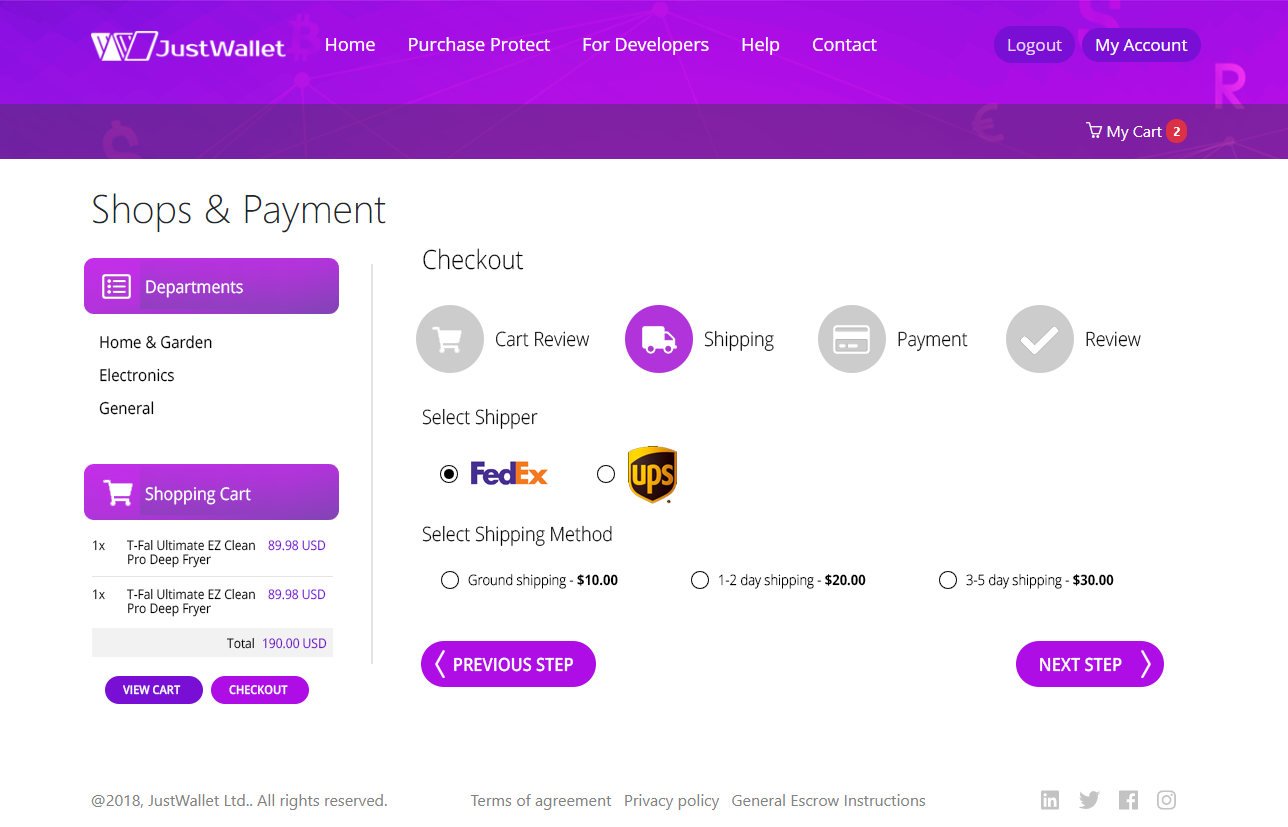
<style>
.page{position:relative;width:1288px;height:827px;background:#ffffff}
.page>*{position:absolute;margin:0}
.t1{font:26.4px "OpenSans-Light";color:#000000;scale:0.91 1}
.t2{font:17.6px "OpenSans";color:#ffffff;scale:0.91 1}
.t3{font:16.5px/33px "OpenSans";color:#000000;scale:0.91 1}
.t4{font:19.8px "OpenSans-Light";color:#000000;scale:0.91 1}
.t5{font:13.2px "OpenSans";scale:0.91 1}
.t6{font:13.2px "OpenSans";color:#000000;scale:0.91 1}
.t7{font:13.2px "OpenSans";color:#790fd4;scale:0.91 1}
.t8{font:14.3px "OpenSans-Light";color:#000000;scale:0.91 1}
.t9{font:14.3px "OpenSans-Bold";color:#000000;scale:0.91 1}
.t10{font:13.2px "OpenSans";color:#730ec9;scale:0.91 1}
.t11{font:18.2px "OpenSans-Semibold";color:#ffffff;text-transform:uppercase;scale:0.9 1}
.t12{font:12.1px "OpenSans-Semibold";color:#ffffff;text-transform:uppercase;scale:0.91 1}
</style>
<div class="page">
<p class="t1" style="left:423px;top:248px;width:101px;height:22px">Checkout</p>
<p class="t2" style="left:146px;top:280px;width:97px;height:18px">Departments</p>
<p class="t3" style="left:99px;top:335px;width:113px;height:80px">Home &amp; Garden<br>Electronics<br>General</p>
<p class="t4" style="left:496px;top:331px;width:94px;height:16px">Cart Review</p>
<p class="t4" style="left:704px;top:330px;width:70px;height:21px">Shipping</p>
<p class="t4" style="left:898px;top:331px;width:70px;height:20px">Payment</p>
<p class="t4" style="left:1086px;top:331px;width:55px;height:16px">Review</p>
<p class="t4" style="left:422px;top:408px;width:116px;height:21px">Select Shipper</p>
<p class="t2" style="left:145px;top:486px;width:106px;height:19px">Shopping Cart</p>
<p class="t4" style="left:422px;top:525px;width:190px;height:21px">Select Shipping Method</p>
<p class="t5" style="left:93px;top:540px;width:12px;height:11px">1x</p>
<p class="t6" style="left:127px;top:539px;width:128px;height:29px">T-Fal Ultimate EZ Clean <br>Pro Deep Fryer</p>
<p class="t7" style="left:268px;top:540px;width:58px;height:11px">89.98 USD</p>
<p class="t8" style="left:468px;top:574px;width:150px;height:15px">Ground shipping -<span class="t9"> $10.00</span></p>
<p class="t8" style="left:719px;top:574px;width:147px;height:15px">1-2 day shipping -<span class="t9"> $20.00</span></p>
<p class="t8" style="left:966px;top:574px;width:148px;height:15px">3-5 day shipping -<span class="t9"> $30.00</span></p>
<p class="t5" style="left:93px;top:589px;width:12px;height:11px">1x</p>
<p class="t6" style="left:127px;top:588px;width:128px;height:29px">T-Fal Ultimate EZ Clean <br>Pro Deep Fryer</p>
<p class="t7" style="left:268px;top:589px;width:58px;height:11px">89.98 USD</p>
<p class="t6" style="left:227px;top:637px;width:27px;height:12px">Total</p>
<p class="t10" style="left:263px;top:638px;width:64px;height:11px">190.00 USD</p>
<p class="t11" style="left:454px;top:657px;width:119px;height:15px">Previous Step</p>
<p class="t11" style="left:1040px;top:657px;width:82px;height:15px">Next Step</p>
<p class="t12" style="left:123px;top:685px;width:58px;height:10px">View Cart</p>
<p class="t12" style="left:229px;top:685px;width:59px;height:10px">CHECKOUT</p>
</div>
